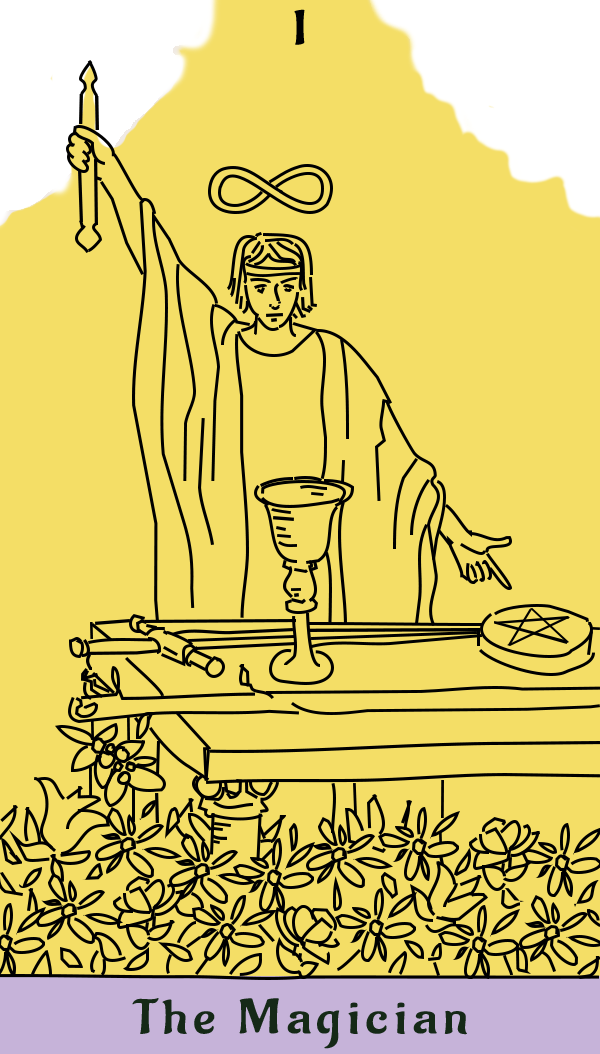
<style>
.page{position:relative;width:600px;height:1054px;background:#f4de66}
.page>*{position:absolute;margin:0}
.t1{font:48px "Aladin-Regular";letter-spacing:0.1em;color:#000000;scale:1.26 1}
.t2{font:48px "Aladin-Regular";letter-spacing:0.1em;color:#152917;scale:1.26 1}
</style>
<div class="page">
<p class="t1" style="left:294px;top:9px;width:11px;height:36px">I</p>
<p class="t2" style="left:132px;top:998px;width:335px;height:51px">The Magician</p>
</div>
